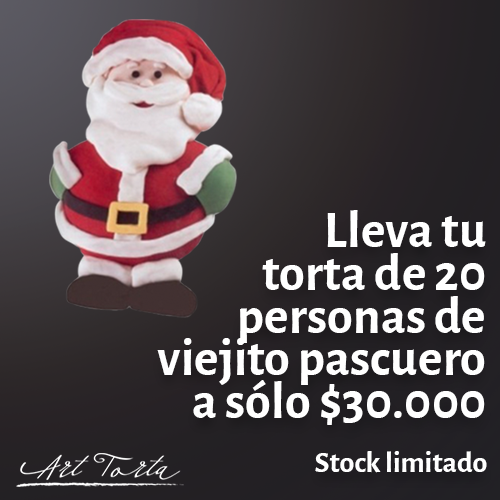
<style>
.page{position:relative;width:500px;height:500px}
.page>*{position:absolute;margin:0}
.t1{font:52.4px/42.9px "AlegreyaSans-Bold";color:#ffffff}
.t2{font:30px "AlegreyaSans-Bold";color:#ffffff}
</style>
<div class="page">
<p class="t1" style="left:157px;top:210px;width:329px;height:215px;text-align:right">Lleva tu<br>torta de 20<br>personas de<br>viejito pascuero<br> a sólo $30.000</p>
<p class="t2" style="left:315px;top:451px;width:172px;height:22px">Stock limitado</p>
</div>
